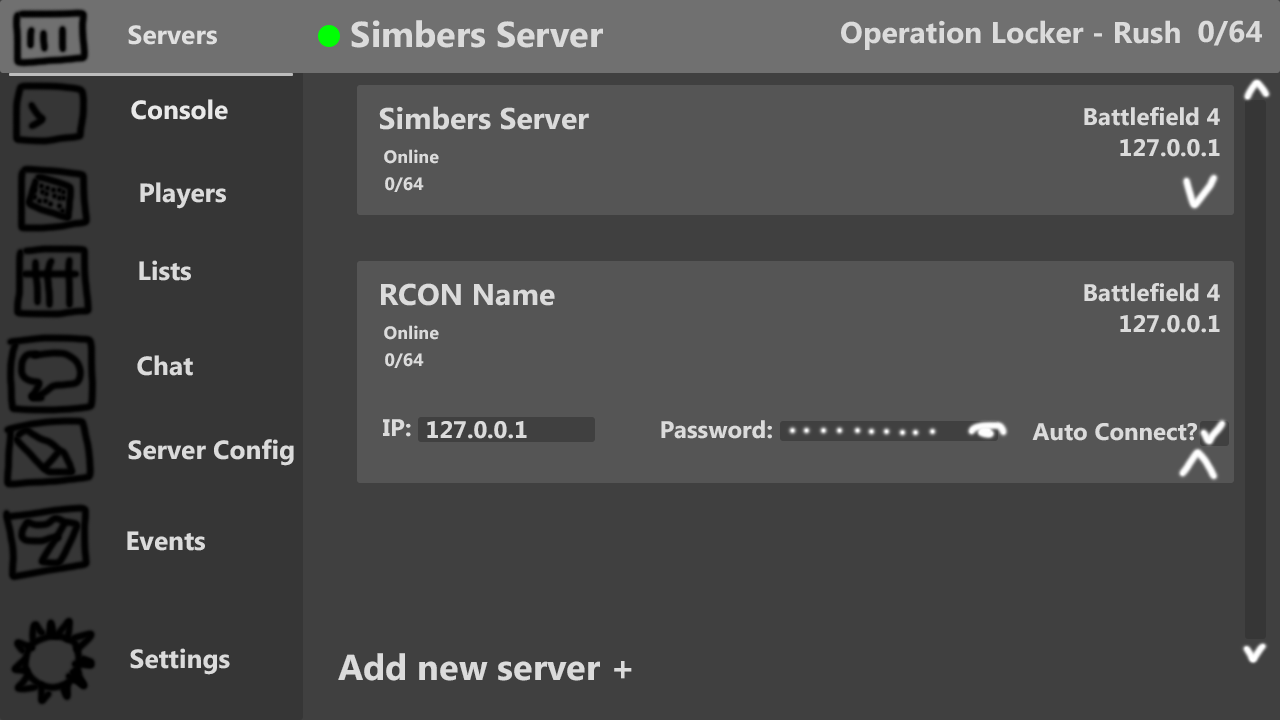
<style>
.page{position:relative;width:1280px;height:720px;background:#404040}
.page>*{position:absolute;margin:0}
.t1{font:26.3px "MicrosoftPhagsPa-Bold";color:#e0e0e0}
.t2{font:36px "MicrosoftPhagsPa-Bold";color:#dbdbdb}
.t3{font:30px "MicrosoftPhagsPa-Bold";color:#dbdbdb}
.t4{font:26.3px "MicrosoftPhagsPa-Bold";color:#e9e9e9}
.t5{font:24px "MicrosoftPhagsPa-Bold";color:#dbdbdb}
.t6{font:18px "MicrosoftPhagsPa-Bold";color:#dbdbdb}
.t7{font:26.3px "MicrosoftPhagsPa-Bold";color:#dbdbdb}
</style>
<div class="page">
<p class="t1" style="left:128px;top:25px;width:89px;height:20px">Servers</p>
<p class="t2" style="left:351px;top:20px;width:252px;height:28px">Simbers Server</p>
<p class="t3" style="left:841px;top:20px;width:339px;height:30px">Operation Locker - Rush</p>
<p class="t3" style="left:1198px;top:20px;width:64px;height:26px">0/64</p>
<p class="t4" style="left:131px;top:99px;width:97px;height:21px">Console</p>
<p class="t3" style="left:379px;top:106px;width:210px;height:24px">Simbers Server</p>
<p class="t5" style="left:1084px;top:107px;width:136px;height:19px">Battlefield 4</p>
<p class="t6" style="left:384px;top:149px;width:55px;height:15px">Online</p>
<p class="t5" style="left:1120px;top:139px;width:100px;height:18px">127.0.0.1</p>
<p class="t7" style="left:140px;top:182px;width:86px;height:27px">Players</p>
<p class="t6" style="left:385px;top:177px;width:39px;height:15px">0/64</p>
<p class="t7" style="left:139px;top:260px;width:52px;height:21px">Lists</p>
<p class="t3" style="left:381px;top:283px;width:174px;height:23px">RCON Name</p>
<p class="t5" style="left:1084px;top:283px;width:136px;height:19px">Battlefield 4</p>
<p class="t5" style="left:1120px;top:315px;width:100px;height:18px">127.0.0.1</p>
<p class="t6" style="left:384px;top:325px;width:55px;height:15px">Online</p>
<p class="t6" style="left:385px;top:353px;width:39px;height:15px">0/64</p>
<p class="t7" style="left:137px;top:355px;width:56px;height:21px">Chat</p>
<p class="t5" style="left:383px;top:419px;width:28px;height:18px">IP:</p>
<p class="t5" style="left:427px;top:421px;width:100px;height:18px">127.0.0.1</p>
<p class="t5" style="left:661px;top:420px;width:111px;height:19px">Password:</p>
<p class="t5" style="left:1032px;top:423px;width:165px;height:18px">Auto Connect?</p>
<p class="t7" style="left:128px;top:439px;width:166px;height:27px">Server Config</p>
<p class="t7" style="left:127px;top:531px;width:78px;height:20px">Events</p>
<p class="t7" style="left:130px;top:648px;width:100px;height:27px">Settings</p>
<p class="t2" style="left:338px;top:653px;width:294px;height:28px">Add new server +</p>
</div>
